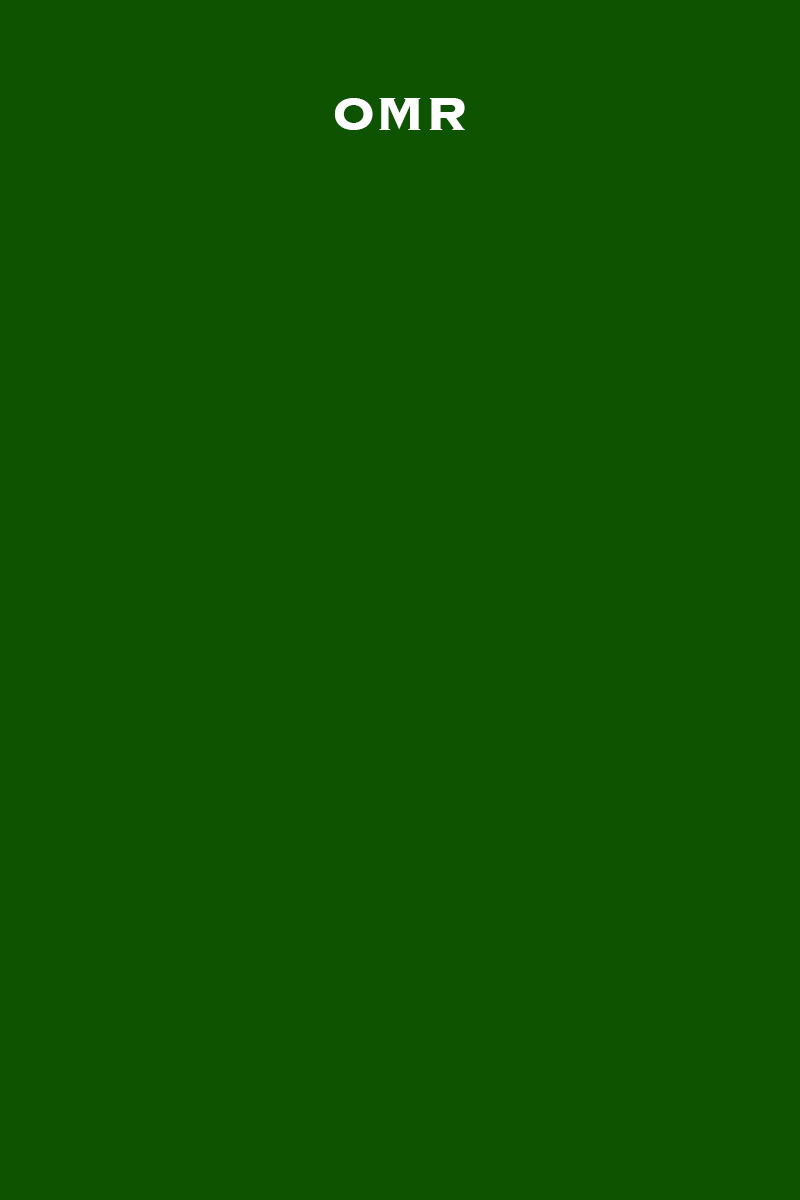
<style>
.page{position:relative;width:800px;height:1200px;background:#0e5300}
.page>*{position:absolute;margin:0}
.t1{font:60px "Copperplate-Bold";color:#fefefe}
</style>
<div class="page">
<p class="t1" style="left:334px;top:98px;width:131px;height:32px">OMR</p>
</div>
